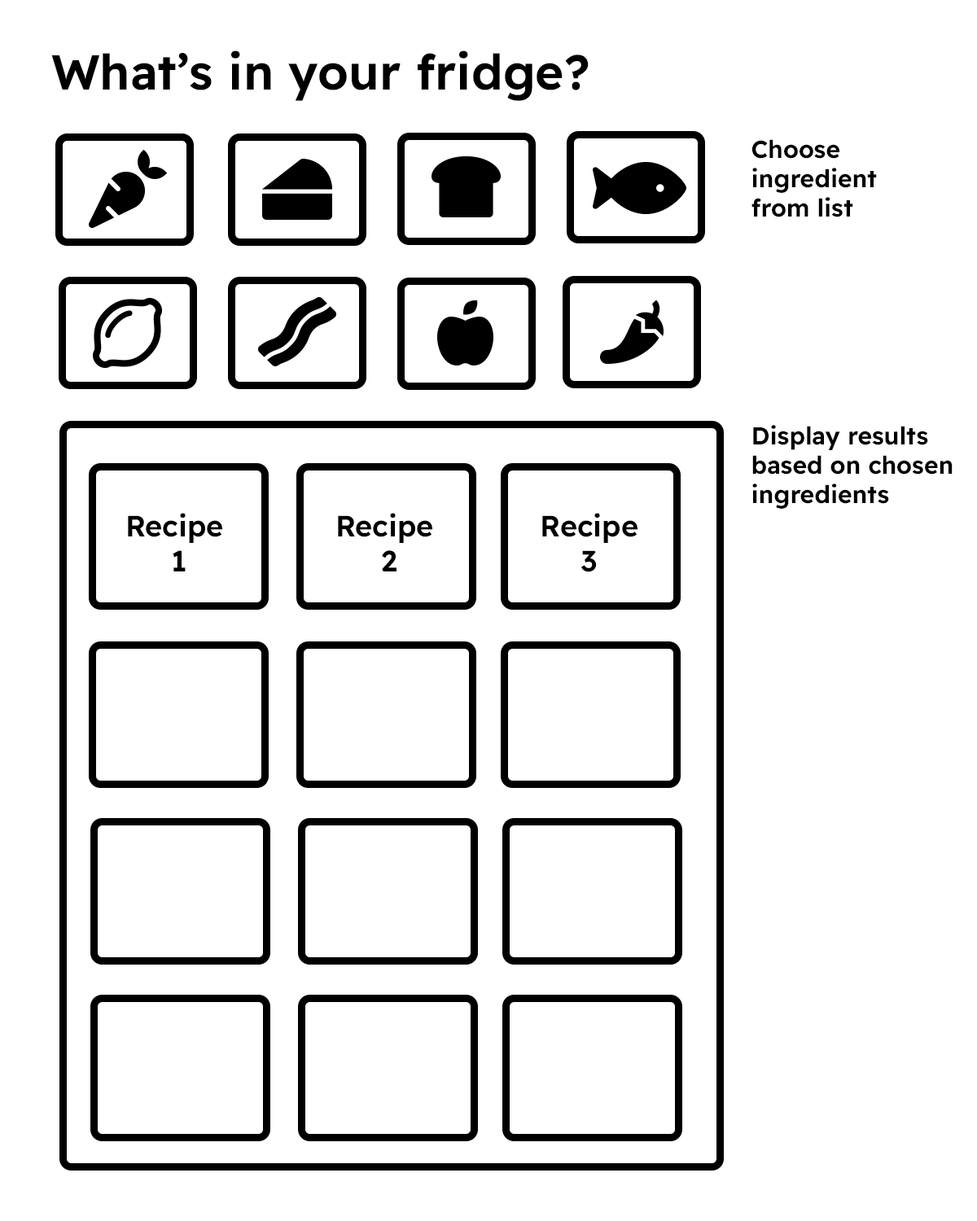
<style>
.page{position:relative;width:977px;height:1221px;background:#ffffff}
.page>*{position:absolute;margin:0}
.t1{font:48.8px "ReadexPro-SemiBold";color:#000000}
.t2{font:24.4px "ReadexPro-SemiBold";color:#000000}
.t3{font:29.3px "ReadexPro-SemiBold";color:#000000}
</style>
<div class="page">
<p class="t1" style="left:51px;top:50px;width:537px;height:51px">What’s in your fridge?</p>
<p class="t2" style="left:751px;top:139px;width:126px;height:78px">Choose <br>ingredient<br>from list</p>
<p class="t2" style="left:752px;top:425px;width:200px;height:84px">Display results<br>based on chosen <br>ingredients</p>
<p class="t3" style="left:128px;top:513px;width:94px;height:58px;text-align:center">Recipe <br>1</p>
<p class="t3" style="left:338px;top:513px;width:94px;height:58px;text-align:center">Recipe <br>2</p>
<p class="t3" style="left:542px;top:513px;width:95px;height:59px;text-align:center">Recipe<br>3</p>
</div>
